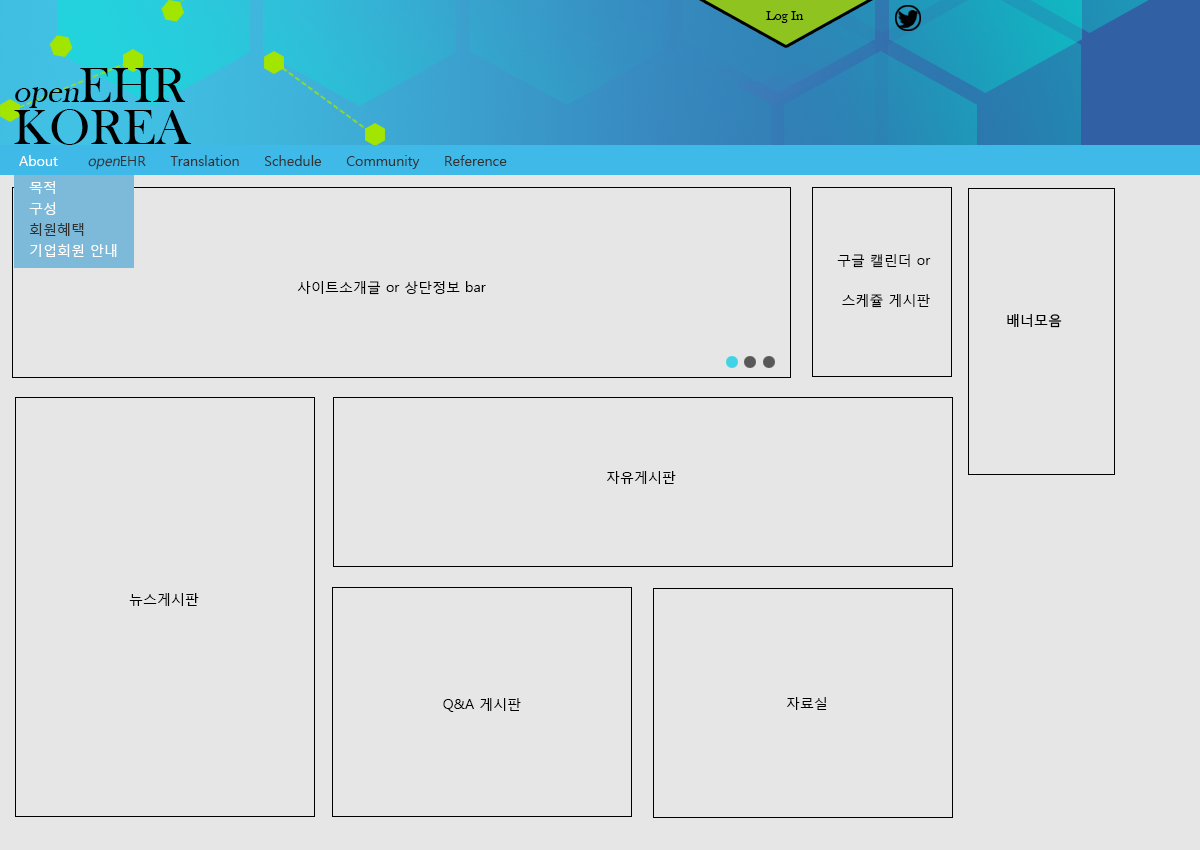
<style>
.page{position:relative;width:1200px;height:850px;background:#e6e6e6}
.page>*{position:absolute;margin:0}
.t1{font:14px "BaskOldFace";color:#000000}
.t2{font:50.8px/42.7px "BaskOldFace";color:#000000}
.t3{font:32.8px/42.7px "BaskOldFace";color:#000000;font-style:italic}
.t4{font:14px "MalgunGothicRegular";color:#323232}
.t5{font:14px "MalgunGothicRegular";color:#ffffff}
.t6{font:14px "MalgunGothicRegular";color:#323232;font-style:italic}
.t7{font:14px/21px "MalgunGothicRegular";color:#ffffff}
.t8{font:14px/21px "MalgunGothicRegular";color:#323232}
.t9{font:14px/40.3px "MalgunGothicRegular";color:#000000}
.t10{font:14px "MalgunGothicRegular";color:#000000}
</style>
<div class="page">
<p class="t1" style="left:766px;top:11px;width:38px;height:12px">Log In</p>
<p class="t2" style="left:14px;top:68px;width:178px;height:77px"><span class="t3">open</span>EHR <br>KOREA</p>
<p class="t4" style="left:19px;top:155px;width:488px;height:15px"><span class="t5">About      </span><span class="t6">open</span>EHR     Translation     Schedule     Community     Reference</p>
<p class="t7" style="left:29px;top:181px;width:88px;height:76px">목적<br>구성<br><span class="t8">회원혜택<br></span>기업회원 안내</p>
<p class="t9" style="left:837px;top:254px;width:94px;height:54px;text-align:center">구글 캘린더 or <br>스케쥴 게시판</p>
<p class="t10" style="left:297px;top:281px;width:189px;height:14px">사이트소개글 or 상단정보 bar</p>
<p class="t10" style="left:607px;top:471px;width:69px;height:13px">자유게시판</p>
<p class="t10" style="left:129px;top:593px;width:70px;height:13px">뉴스게시판</p>
<p class="t10" style="left:443px;top:698px;width:78px;height:14px">Q&amp;A 게시판</p>
<p class="t10" style="left:787px;top:697px;width:40px;height:13px">자료실</p>
</div>
